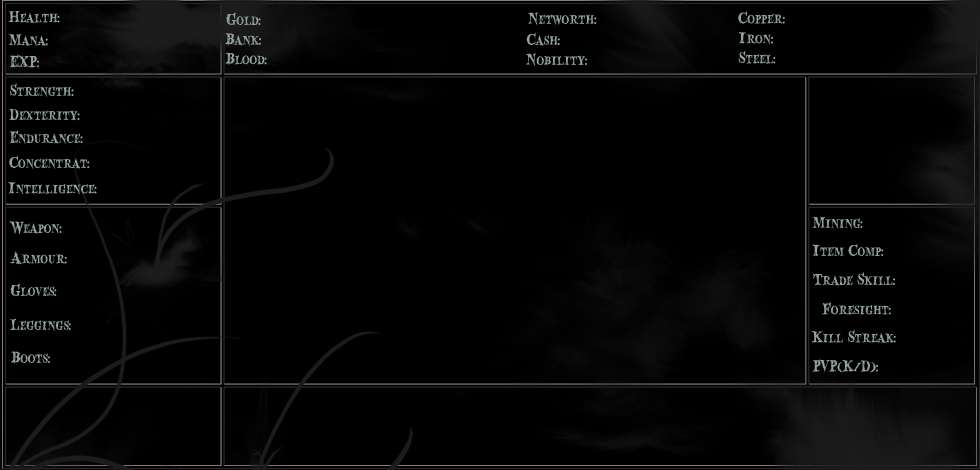
<style>
.page{position:relative;width:980px;height:470px;background:#000000}
.page>*{position:absolute;margin:0}
.t1{font:18px "BloodCrowCondensed";color:#93a3a1}
</style>
<div class="page">
<p class="t1" style="left:8px;top:11px;width:52px;height:13px">Health:</p>
<p class="t1" style="left:226px;top:12px;width:35px;height:13px">Gold:</p>
<p class="t1" style="left:528px;top:12px;width:69px;height:13px">Networth:</p>
<p class="t1" style="left:738px;top:10px;width:47px;height:14px">Copper:</p>
<p class="t1" style="left:8px;top:33px;width:40px;height:14px">Mana:</p>
<p class="t1" style="left:225px;top:33px;width:36px;height:13px">Bank:</p>
<p class="t1" style="left:526px;top:32px;width:34px;height:14px">Cash:</p>
<p class="t1" style="left:739px;top:32px;width:34px;height:12px">Iron:</p>
<p class="t1" style="left:10px;top:54px;width:29px;height:14px">EXP:</p>
<p class="t1" style="left:225px;top:52px;width:42px;height:13px">Blood:</p>
<p class="t1" style="left:526px;top:53px;width:61px;height:13px">Nobility:</p>
<p class="t1" style="left:738px;top:50px;width:38px;height:14px">Steel:</p>
<p class="t1" style="left:10px;top:83px;width:64px;height:14px">Strength:</p>
<p class="t1" style="left:9px;top:109px;width:71px;height:12px">Dexterity:</p>
<p class="t1" style="left:9px;top:130px;width:74px;height:14px">Endurance:</p>
<p class="t1" style="left:9px;top:155px;width:81px;height:14px">Concentrat:</p>
<p class="t1" style="left:8px;top:182px;width:89px;height:12px">Intelligence:</p>
<p class="t1" style="left:9px;top:221px;width:53px;height:14px">Weapon:</p>
<p class="t1" style="left:812px;top:216px;width:51px;height:13px">Mining:</p>
<p class="t1" style="left:812px;top:243px;width:72px;height:13px">Item Comp:</p>
<p class="t1" style="left:9px;top:251px;width:58px;height:14px">Armour:</p>
<p class="t1" style="left:813px;top:272px;width:82px;height:14px">Trade Skill:</p>
<p class="t1" style="left:10px;top:283px;width:47px;height:14px">Gloves:</p>
<p class="t1" style="left:822px;top:302px;width:69px;height:13px">Foresight:</p>
<p class="t1" style="left:10px;top:318px;width:61px;height:13px">Leggings:</p>
<p class="t1" style="left:811px;top:329px;width:85px;height:15px">Kill Streak:</p>
<p class="t1" style="left:11px;top:351px;width:39px;height:13px">Boots:</p>
<p class="t1" style="left:812px;top:359px;width:66px;height:14px">PVP(K/D):</p>
</div>
